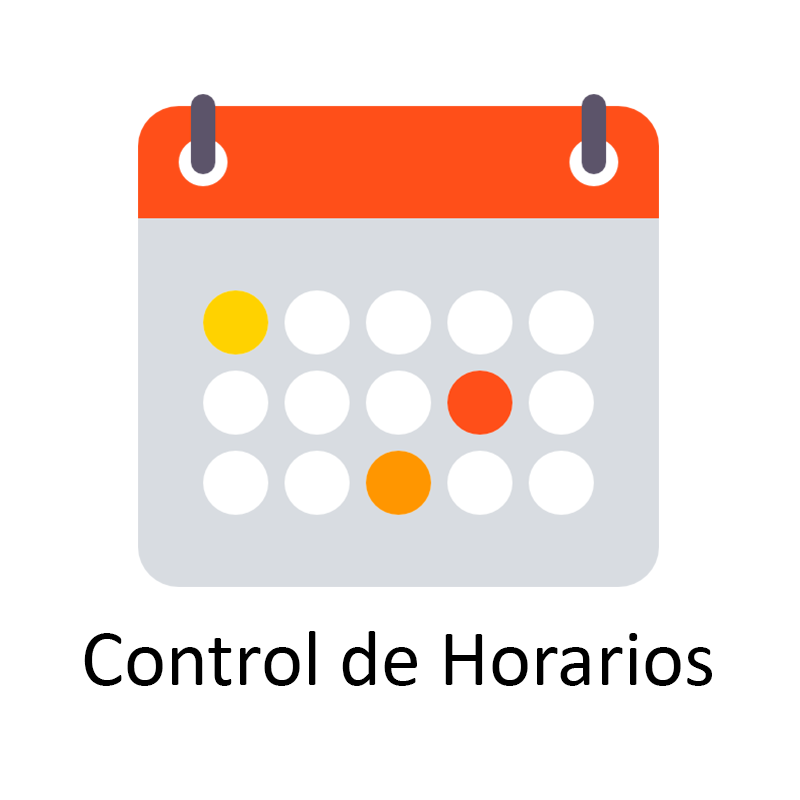
<style>
.page{position:relative;width:800px;height:800px;background:#ffffff}
.page>*{position:absolute;margin:0}
.t1{font:80px "Calibri";color:#000000}
</style>
<div class="page">
<p class="t1" style="left:84px;top:631px;width:628px;height:55px">Control de Horarios</p>
</div>
